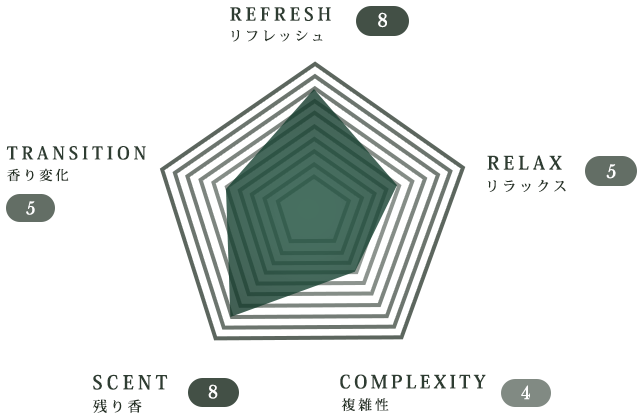
<style>
.page{position:relative;width:640px;height:420px;background:#ffffff}
.page>*{position:absolute;margin:0}
.t1{font:17.9px "KozMinPr6N-Bold";letter-spacing:0.22em;color:#27452e}
.t2{font:17.9px "LibreBaskerville-Regular";letter-spacing:0.06em;color:#ffffff}
.t3{font:13.4px "KozMinPr6N-Medium";letter-spacing:0.22em;color:#253125}
.t4{font:17.5px "KozMinPr6N-Bold";letter-spacing:0.22em;color:#27452e}
.t5{font:18.4px "KozMinPr6N-Bold";letter-spacing:0.22em;color:#27452e}
.t6{font:13.1px "KozMinPr6N-Medium";letter-spacing:0.22em;color:#20381f}
.t7{font:17.7px "LibreBaskerville-Regular";letter-spacing:0.06em;color:#ffffff}
.t8{font:13.8px "KozMinPr6N-Medium";letter-spacing:0.22em;color:#20381f}
.t9{font:16.8px "LibreBaskerville-Regular";letter-spacing:0.06em;color:#ffffff}
.t10{font:18.9px "KozMinPr6N-Bold";letter-spacing:0.22em;color:#27452e}
.t11{font:18.2px "KozMinPr6N-Bold";letter-spacing:0.18em;color:#27452e}
.t12{font:17.4px "LibreBaskerville-Regular";letter-spacing:0.06em;color:#ffffff}
.t13{font:17.1px "LibreBaskerville-Regular";letter-spacing:0.06em;color:#ffffff}
.t14{font:14.2px "KozMinPr6N-Medium";letter-spacing:0.22em;color:#20381f}
.t15{font:13.7px "KozMinPr6N-Medium";letter-spacing:0.22em;color:#253125}
</style>
<div class="page">
<p class="t1" style="left:230px;top:7px;width:101px;height:14px">REFRESH</p>
<p class="t2" style="left:378px;top:12px;width:9px;height:16px">8</p>
<p class="t3" style="left:231px;top:30px;width:92px;height:12px">リフレッシュ</p>
<p class="t4" style="left:6px;top:146px;width:140px;height:14px">TRANSITION</p>
<p class="t5" style="left:487px;top:155px;width:75px;height:15px">RELAX</p>
<p class="t6" style="left:7px;top:168px;width:62px;height:14px">香り変化</p>
<p class="t7" style="left:606px;top:164px;width:10px;height:15px">5</p>
<p class="t8" style="left:488px;top:179px;width:78px;height:13px">リラックス</p>
<p class="t9" style="left:26px;top:201px;width:9px;height:14px">5</p>
<p class="t10" style="left:93px;top:374px;width:75px;height:16px">SCENT</p>
<p class="t11" style="left:340px;top:374px;width:146px;height:15px">COMPLEXITY</p>
<p class="t12" style="left:208px;top:384px;width:10px;height:15px">8</p>
<p class="t13" style="left:521px;top:385px;width:9px;height:15px">4</p>
<p class="t14" style="left:93px;top:399px;width:49px;height:14px">残り香</p>
<p class="t15" style="left:341px;top:398px;width:48px;height:14px">複雑性</p>
</div>
